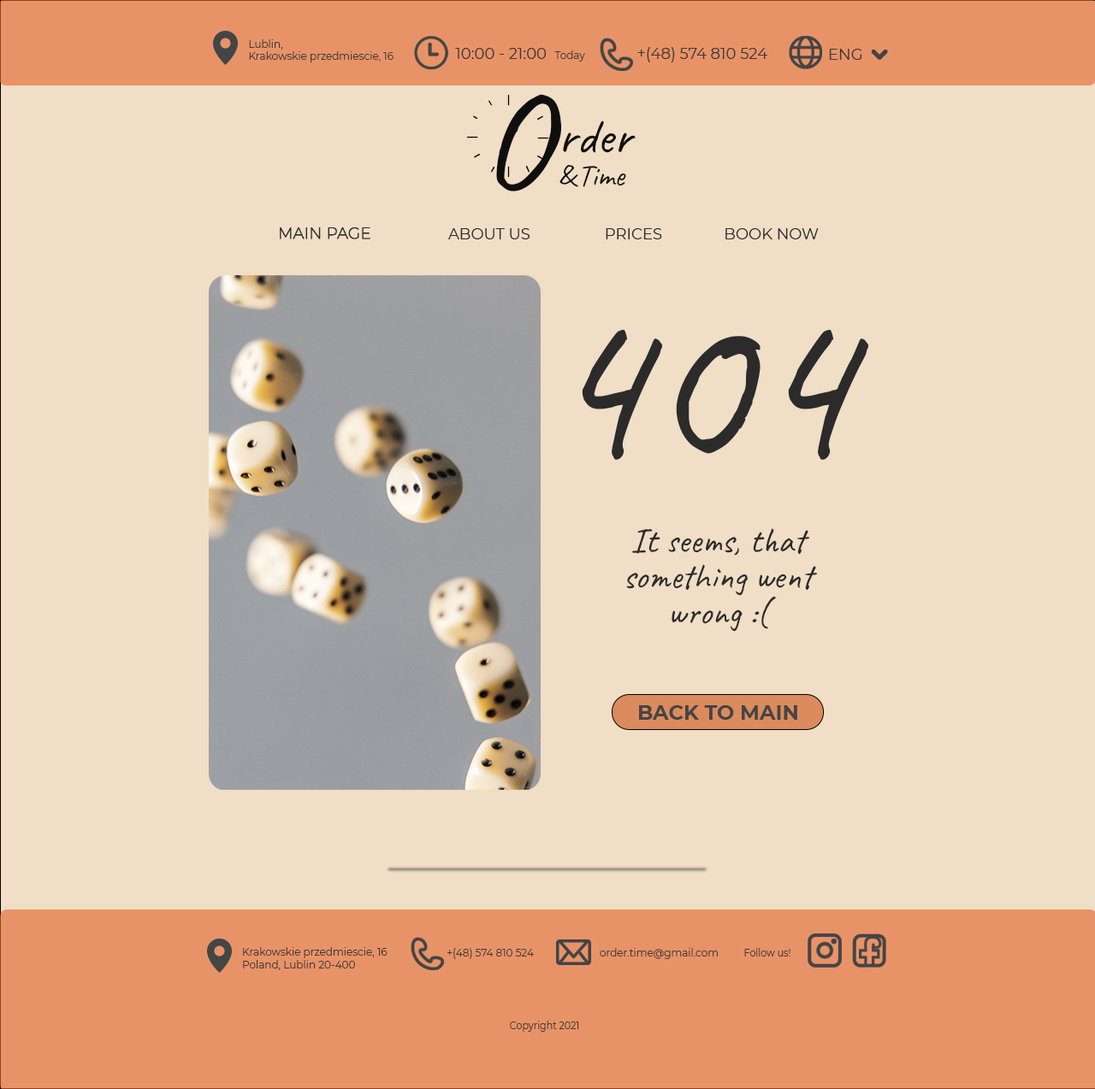
<style>
.page{position:relative;width:1095px;height:1089px;background:#f0dec6}
.page>*{position:absolute;margin:0}
.t1{font:10.3px "Montserrat-Regular";color:#3e3b3b}
.t2{font:15.4px "Montserrat-Regular";color:#3e3b3b}
.t3{font:136.8px "Caveat-Regular";color:#0f0f0f}
.t4{font:51.3px "Caveat-Regular";color:#0f0f0f}
.t5{font:30.8px "Caveat-Regular";color:#0f0f0f}
.t6{font:15.4px "Montserrat-ExtraLight";color:#2b2b2b;font-weight:bold}
.t7{font:15.4px "Montserrat-Regular";color:#2b2b2b}
.t8{font:229.2px "Caveat-Regular";color:#2b2b2b}
.t9{font:35.9px/35.9px "Caveat-Regular";color:#2b2b2b}
.t10{font:10.3px "Montserrat-Regular";color:#3e3b3b;scale:0.92 1}
</style>
<div class="page">
<p class="t1" style="left:249px;top:39px;width:144px;height:23px;text-align:justify">Lublin,<br>Krakowskie przedmiescie, 16</p>
<p class="t2" style="left:455px;top:48px;width:130px;height:14px">10:00 - 21:00  <span class="t1">Today</span></p>
<p class="t2" style="left:637px;top:47px;width:130px;height:15px">+(48) 574 810 524</p>
<p class="t2" style="left:829px;top:49px;width:33px;height:11px">ENG</p>
<p class="t3" style="left:496px;top:94px;width:66px;height:98px">O</p>
<p class="t4" style="left:563px;top:121px;width:72px;height:32px">rder</p>
<p class="t5" style="left:559px;top:165px;width:19px;height:22px">&amp;</p>
<p class="t5" style="left:582px;top:166px;width:44px;height:21px">Time</p>
<p class="t6" style="left:280px;top:227px;width:90px;height:12px">MAIN PAGE</p>
<p class="t7" style="left:447px;top:228px;width:83px;height:11px">ABOUT US</p>
<p class="t7" style="left:605px;top:228px;width:57px;height:11px">PRICES</p>
<p class="t7" style="left:725px;top:228px;width:93px;height:11px">BOOK NOW</p>
<p class="t8" style="left:581px;top:329px;width:288px;height:131px">404</p>
<p class="t9" style="left:626px;top:528px;width:191px;height:104px;text-align:center">It seems, that something went wrong :(</p>
<p class="t1" style="left:243px;top:947px;width:144px;height:24px;text-align:justify">Krakowskie przedmiescie, 16<br>Poland, Lublin 20-400</p>
<p class="t1" style="left:447px;top:948px;width:87px;height:11px">+(48) 574 810 524</p>
<p class="t1" style="left:599px;top:948px;width:118px;height:11px">order.time@gmail.com</p>
<p class="t10" style="left:744px;top:948px;width:46px;height:9px">Follow us!</p>
<p class="t10" style="left:510px;top:1021px;width:69px;height:11px">Copyright 2021</p>
</div>
